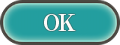
<style>
.page{position:relative;width:120px;height:45px}
.page>*{position:absolute;margin:0}
.t1{font:22px "RyuminPro-ExBold";letter-spacing:-0.08em;color:#fdfbf9}
</style>
<div class="page">
<p class="t1" style="left:44px;top:14px;width:32px;height:17px">OK</p>
</div>
